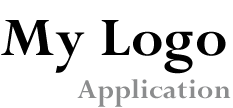
<style>
.page{position:relative;width:233px;height:108px;background:#ffffff}
.page>*{position:absolute;margin:0}
.t1{font:60px "Perpetua-Bold";letter-spacing:0.01em;color:#000000}
.t2{font:30px "Perpetua-Bold";letter-spacing:0.01em;color:#8c8d8e}
</style>
<div class="page">
<p class="t1" style="left:1px;top:20px;width:225px;height:54px">My Logo</p>
<p class="t2" style="left:77px;top:79px;width:154px;height:28px">Application</p>
</div>
